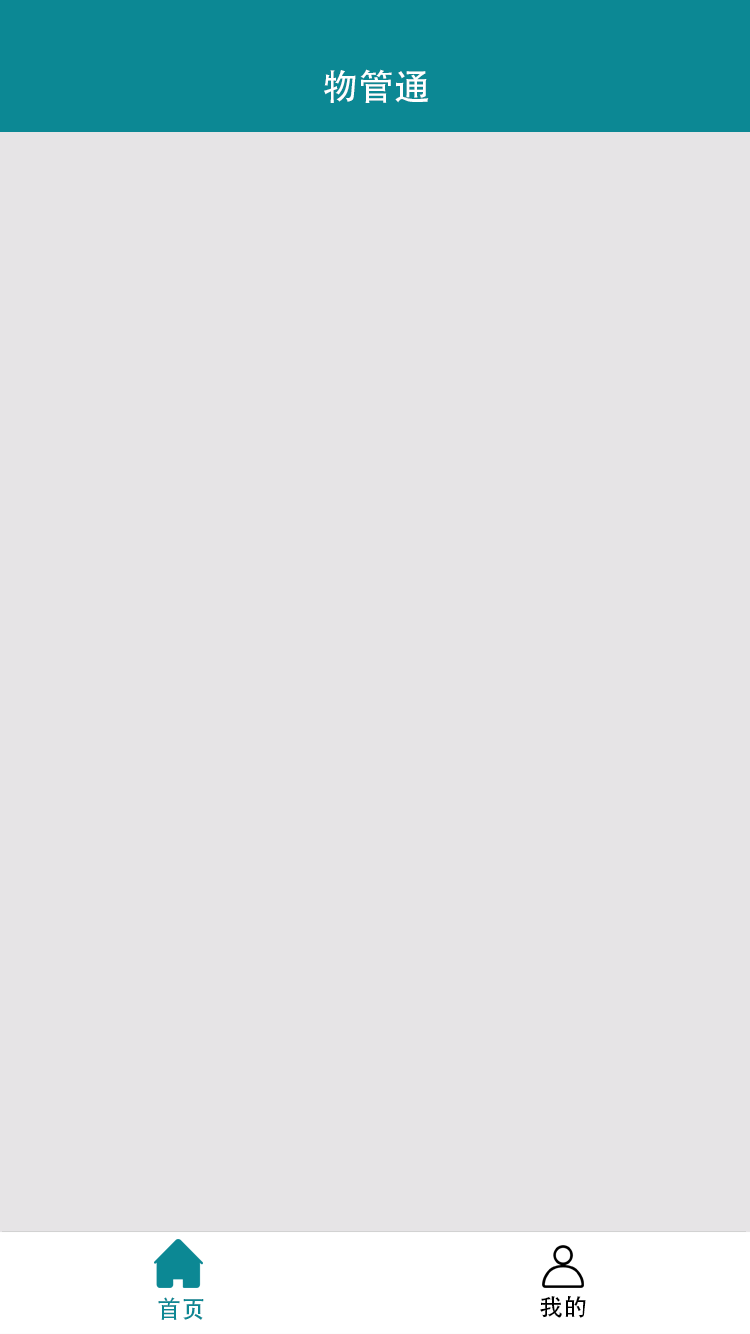
<style>
.page{position:relative;width:750px;height:1334px;background:#e6e4e6}
.page>*{position:absolute;margin:0}
.t1{font:36px "AdobeHeitiStd-Regular";color:#ffffff}
.t2{font:24px "AdobeHeitiStd-Regular";color:#0c8894}
.t3{font:24px "AdobeHeitiStd-Regular";color:#000000}
</style>
<div class="page">
<p class="t1" style="left:324px;top:69px;width:105px;height:34px">物管通</p>
<p class="t2" style="left:158px;top:1297px;width:46px;height:23px">首页</p>
<p class="t3" style="left:540px;top:1296px;width:46px;height:22px">我的</p>
</div>
